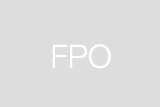
<style>
.page{position:relative;width:160px;height:107px;background:#dddddd}
.page>*{position:absolute;margin:0}
.t1{font:32px "HelveticaNeue-Light";letter-spacing:0.005em;color:#ffffff}
</style>
<div class="page">
<p class="t1" style="left:52px;top:44px;width:59px;height:25px">FPO</p>
</div>
